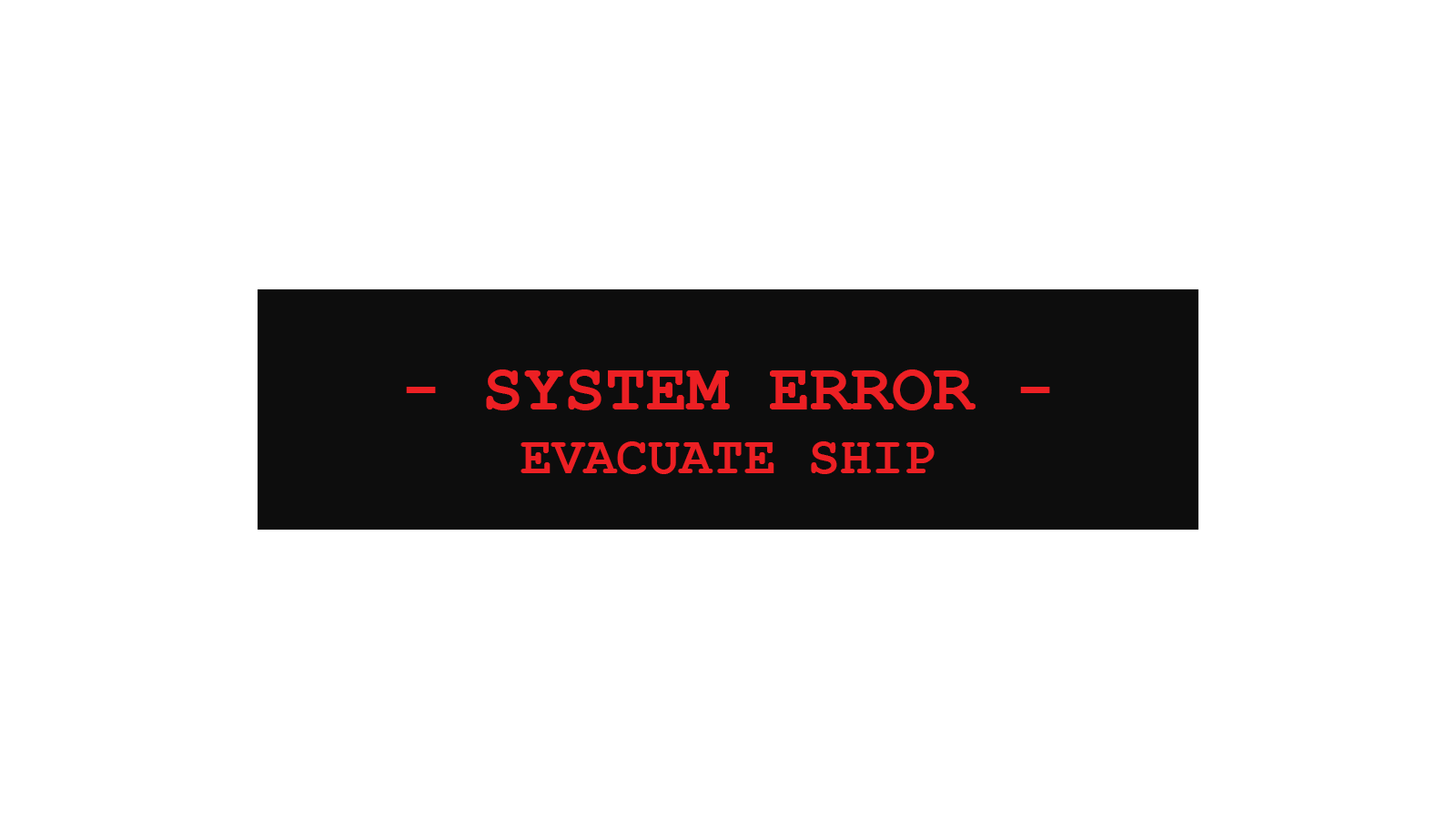
<style>
.page{position:relative;width:1456px;height:819px;background:#ffffff}
.page>*{position:absolute;margin:0}
.t1{font:68.2px "CourierNewPS-BoldMT";color:#ed2024}
.t2{font:53.1px "CourierNewPS-BoldMT";color:#ed2024}
</style>
<div class="page">
<p class="t1" style="left:406px;top:369px;width:644px;height:105px;text-align:center">- SYSTEM ERROR -<br><span class="t2">EVACUATE SHIP</span></p>
</div>
